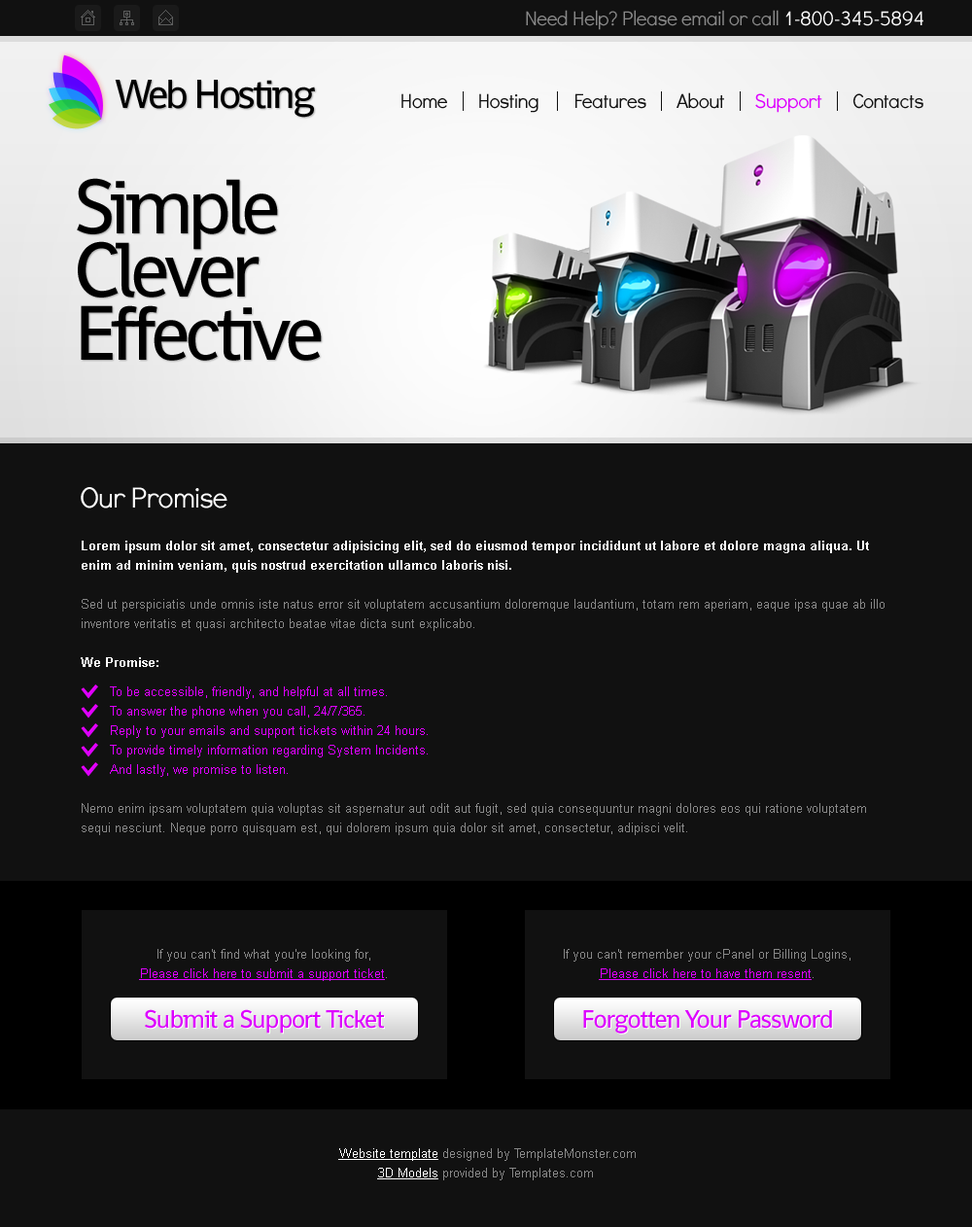
<style>
.page{position:relative;width:972px;height:1227px;background:#111111}
.page>*{position:absolute;margin:0}
.t1{font:20.4px "DidactGothic";letter-spacing:-0.025em;color:#888888}
.t2{font:20.4px "DidactGothic";letter-spacing:-0.025em;color:#ffffff}
.t3{font:40.8px "Shanti";letter-spacing:-0.075em;color:#000000}
.t4{font:20.4px "DidactGothic";letter-spacing:-0.025em;color:#111111}
.t5{font:20.4px "DidactGothic";letter-spacing:-0.025em;color:#dd00ff}
.t6{font:77.8px/63.2px "Shanti";letter-spacing:-0.075em;color:#000000}
.t7{font:29.2px "DidactGothic";letter-spacing:-0.025em;color:#ffffff}
.t8{font:12.6px/19.4px "ArialMT";color:#888888}
.t9{font:12.6px/19.4px "Arial-BoldMT";color:#ffffff}
.t10{font:12.6px/29.2px "ArialMT";color:#de00ff}
.t11{font:12.6px/19.4px "ArialMT";color:#de00ff}
.t12{font:12.6px/19.4px "ArialMT";color:#de00ff;text-decoration:underline}
.t13{font:25.3px "Shanti";letter-spacing:-0.05em;color:#dd00ff}
.t14{font:12.6px/19.4px "ArialMT";color:#ffffff}
.t15{font:12.6px/19.4px "ArialMT";color:#ffffff;text-decoration:underline}
</style>
<div class="page">
<p class="t1" style="left:526px;top:10px;width:397px;height:20px">Need Help? Please email or call <span class="t2">1-800-345-5894</span></p>
<p class="t3" style="left:115px;top:80px;width:200px;height:38px">Web Hosting</p>
<p class="t4" style="left:401px;top:92px;width:522px;height:21px">Home       Hosting        Features       About       <span class="t5">Support</span>       Contacts</p>
<p class="t6" style="left:77px;top:178px;width:245px;height:183px">Simple<br>Clever<br>Effective</p>
<p class="t7" style="left:81px;top:487px;width:146px;height:21px">Our Promise</p>
<p class="t8" style="left:81px;top:540px;width:804px;height:295px"><span class="t9">Lorem ipsum dolor sit amet, consectetur adipisicing elit, sed do eiusmod tempor incididunt ut labore et dolore magna aliqua. Ut enim ad minim veniam, quis nostrud exercitation ullamco laboris nisi.<br></span><br>Sed ut perspiciatis unde omnis iste natus error sit voluptatem accusantium doloremque laudantium, totam rem aperiam, eaque ipsa quae ab illo inventore veritatis et quasi architecto beatae vitae dicta sunt explicabo.<br><br><span class="t9">We Promise:<br></span><span class="t10">T</span><span class="t11">o be accessible, friendly, and helpful at all times.<br>To answer the phone when you call, 24/7/365.<br>Reply to your emails and support tickets within 24 hours.<br>To provide timely information regarding System Incidents.<br>And lastly, we promise to listen.<br><br></span>Nemo enim ipsam voluptatem quia voluptas sit aspernatur aut odit aut fugit, sed quia consequuntur magni dolores eos qui ratione voluptatem sequi nesciunt. Neque porro quisquam est, qui dolorem ipsum quia dolor sit amet, consectetur, adipisci velit.</p>
<p class="t12" style="left:139px;top:949px;width:248px;height:32px;text-align:center"><span class="t8">If you can't find what you're looking for,<br></span>Please click here to submit a support ticket<span class="t8">.</span></p>
<p class="t8" style="left:564px;top:949px;width:287px;height:31px;text-align:center">If you can't remember your cPanel or Billing Logins,<br><span class="t12">Please click here to have them resent</span>.</p>
<p class="t13" style="left:145px;top:1009px;width:239px;height:24px">Submit a Support Ticket</p>
<p class="t13" style="left:583px;top:1010px;width:249px;height:23px">Forgotten Your Password</p>
<p class="t8" style="left:338px;top:1148px;width:298px;height:32px;text-align:center"><span class="t14"> </span><span class="t15">Website template</span> designed by TemplateMonster.com<br><span class="t15">3D Models</span> provided by Templates.com</p>
</div>
